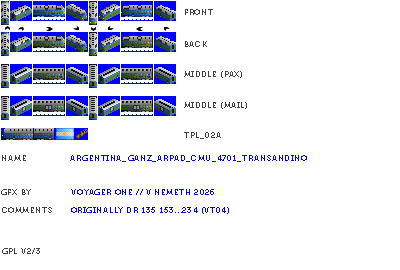
<style>
.page{position:relative;width:400px;height:270px;background:#ffffff}
.page>*{position:absolute;margin:0}
.t1{font:8px "Museo700-Regular";letter-spacing:0.075em;color:#404040;text-transform:uppercase}
.t2{font:8px "Museo700-Regular";letter-spacing:0.075em;color:#0000ff;text-transform:uppercase}
</style>
<div class="page">
<p class="t1" style="left:185px;top:9px;width:28px;height:6px">front</p>
<p class="t1" style="left:185px;top:41px;width:22px;height:6px">back</p>
<p class="t1" style="left:184px;top:71px;width:58px;height:7px">middle (pax)</p>
<p class="t1" style="left:184px;top:102px;width:63px;height:7px">middle (mail)</p>
<p class="t1" style="left:184px;top:132px;width:37px;height:7px">tpl_02a</p>
<p class="t1" style="left:2px;top:155px;width:24px;height:6px">name</p>
<p class="t2" style="left:70px;top:155px;width:237px;height:7px">Argentina_Ganz_Arpad_CMU_4701_Transandino</p>
<p class="t1" style="left:1px;top:189px;width:30px;height:6px">gfx by</p>
<p class="t2" style="left:71px;top:189px;width:143px;height:6px">voyager one // v nemeth 2026</p>
<p class="t1" style="left:2px;top:207px;width:50px;height:6px">comments</p>
<p class="t2" style="left:71px;top:207px;width:158px;height:7px">originally dr 135 153...234 (vt04)</p>
<p class="t1" style="left:2px;top:248px;width:38px;height:6px">gpl v2/3</p>
</div>
